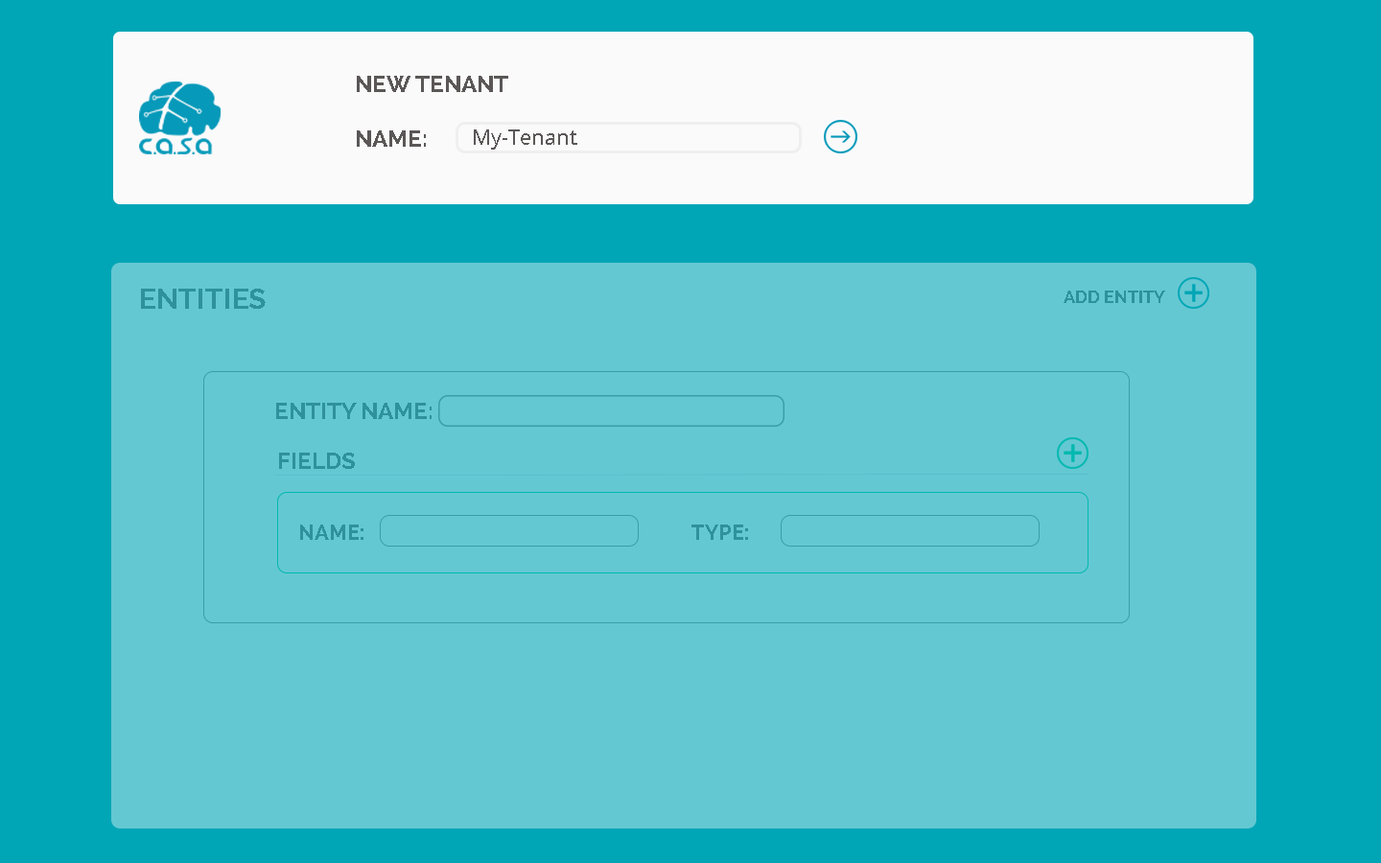
<style>
.page{position:relative;width:1381px;height:863px;background:#64c8d2}
.page>*{position:absolute;margin:0}
.t1{font:23px "Raleway-Bold";color:#5b5757}
.t2{font:21.1px "OpenSans";color:#5b5757}
.t3{font:28.8px "Raleway-Bold";color:#2f919b}
.t4{font:17.3px "Raleway-Bold";color:#2f919b}
.t5{font:23px "Raleway-Bold";color:#2f919b}
.t6{font:21.1px "Raleway-Bold";color:#2f919b}
</style>
<div class="page">
<p class="t1" style="left:357px;top:76px;width:151px;height:16px">NEW TENANT</p>
<p class="t1" style="left:357px;top:130px;width:69px;height:17px">NAME:</p>
<p class="t2" style="left:474px;top:129px;width:103px;height:21px">My-Tenant</p>
<p class="t3" style="left:141px;top:289px;width:125px;height:20px">ENTITIES</p>
<p class="t4" style="left:1064px;top:291px;width:101px;height:12px">ADD ENTITY</p>
<p class="t5" style="left:276px;top:403px;width:156px;height:16px">ENTITY NAME:</p>
<p class="t5" style="left:279px;top:453px;width:76px;height:16px">FIELDS</p>
<p class="t6" style="left:300px;top:525px;width:64px;height:15px">NAME:</p>
<p class="t6" style="left:692px;top:525px;width:56px;height:15px">TYPE:</p>
</div>
